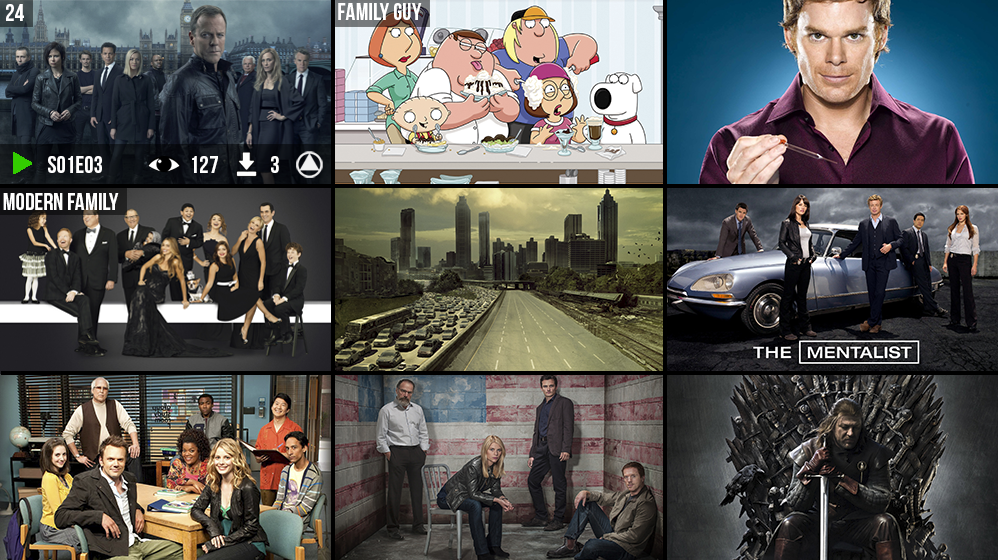
<style>
.page{position:relative;width:998px;height:560px}
.page>*{position:absolute;margin:0}
.t1{font:24px "BebasNeue";color:#ffffff}
</style>
<div class="page">
<p class="t1" style="left:6px;top:4px;width:18px;height:17px">24</p>
<p class="t1" style="left:338px;top:3px;width:84px;height:17px">FAMILY GUY</p>
<p class="t1" style="left:48px;top:156px;width:54px;height:17px">S01E03</p>
<p class="t1" style="left:192px;top:156px;width:26px;height:17px">127</p>
<p class="t1" style="left:271px;top:156px;width:8px;height:17px">3</p>
<p class="t1" style="left:3px;top:193px;width:116px;height:17px">Modern FAMILY</p>
</div>
